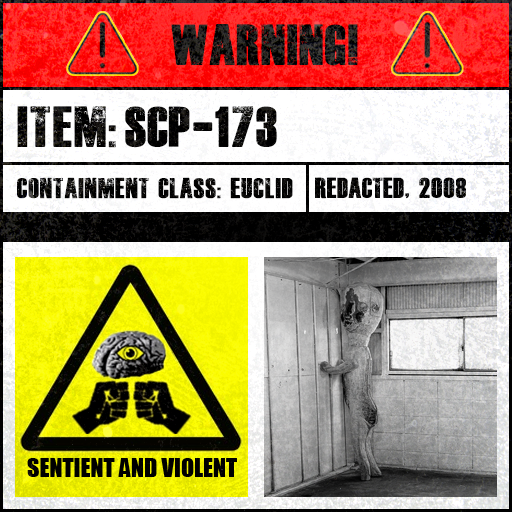
<style>
.page{position:relative;width:512px;height:512px}
.page>*{position:absolute;margin:0}
.t1{font:40px "DeadKansas"}
.t2{font:40px "DeadKansas";color:#000000}
.t3{font:20px "DeadKansas";color:#000000}
</style>
<div class="page">
<p class="t1" style="left:171px;top:24px;width:187px;height:42px">WARNING!</p>
<p class="t2" style="left:17px;top:106px;width:260px;height:42px">Item: SCP-173</p>
<p class="t3" style="left:17px;top:177px;width:276px;height:22px">Containment Class: Euclid</p>
<p class="t3" style="left:315px;top:177px;width:151px;height:22px">REDACTED, 2008</p>
</div>
